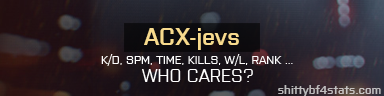
<style>
.page{position:relative;width:384px;height:96px}
.page>*{position:absolute;margin:0}
.t1{font:24px "Purista-SemiBold";color:#f7da8d}
.t2{font:12px "Purista";color:#fefefe}
.t3{font:18px "Purista";color:#fefefe}
.t4{font:12px "Purista-SemiBold";color:#c0bdbf}
</style>
<div class="page">
<p class="t1" style="left:144px;top:28px;width:95px;height:22px">ACX-jevs</p>
<p class="t2" style="left:101px;top:54px;width:192px;height:12px">K/D, SPM, TIME, KILLS, W/L, RANK ...</p>
<p class="t3" style="left:142px;top:69px;width:111px;height:13px">WHO CARES?</p>
<p class="t4" style="left:278px;top:85px;width:103px;height:11px">shittybf4stats.com</p>
</div>
